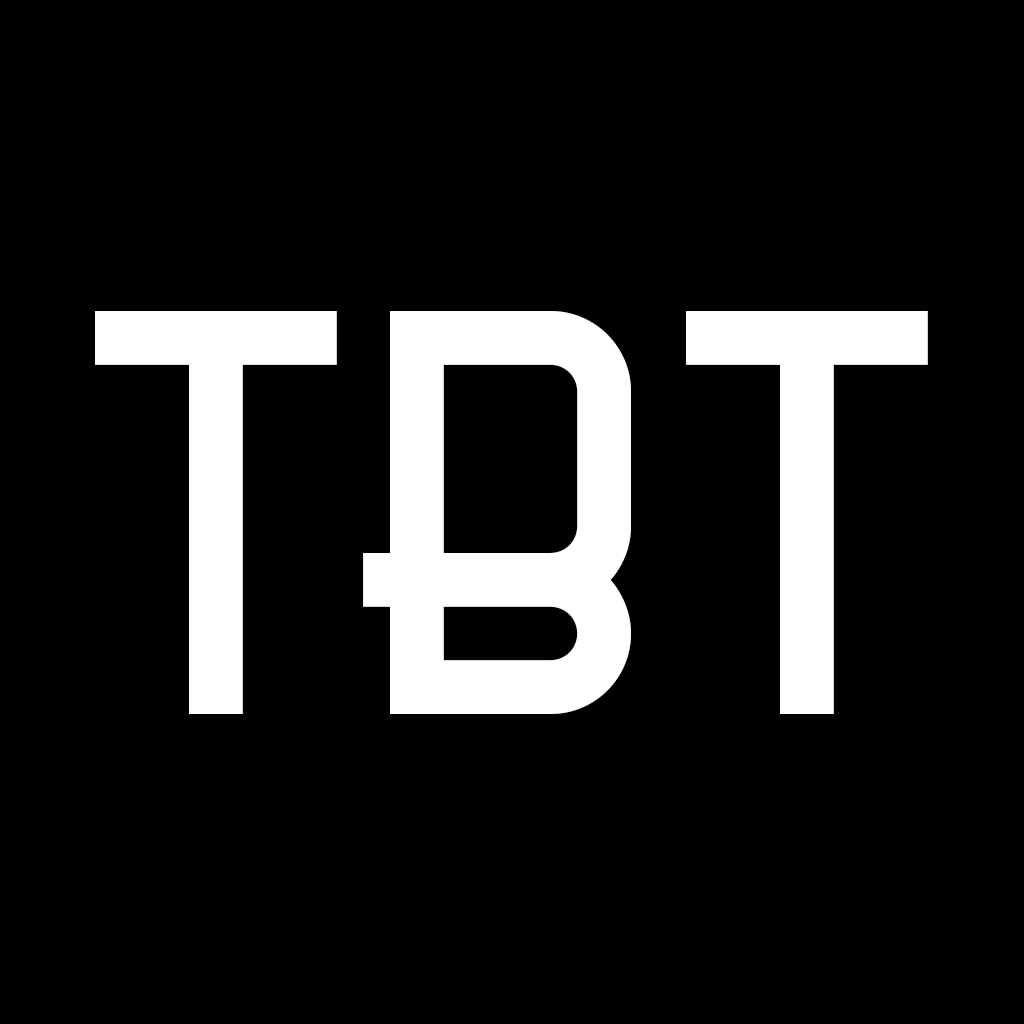
<style>
.page{position:relative;width:1024px;height:1024px;background:#000000}
.page>*{position:absolute;margin:0}
.t1{font:537.8px "ScienceFair";color:#ffffff}
</style>
<div class="page">
<p class="t1" style="left:95px;top:311px;width:833px;height:403px">TBT</p>
</div>
